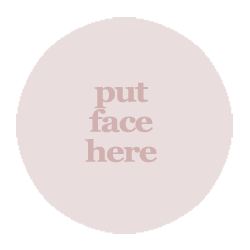
<style>
.page{position:relative;width:250px;height:250px;background:#e9dedd}
.page>*{position:absolute;margin:0}
.t1{font:30px/30px "Georgia-Bold";letter-spacing:-0.05em;color:#d0b1b0;scale:1.1 1}
</style>
<div class="page">
<p class="t1" style="left:85px;top:82px;width:72px;height:81px;text-align:center">put<br>face<br>here</p>
</div>
